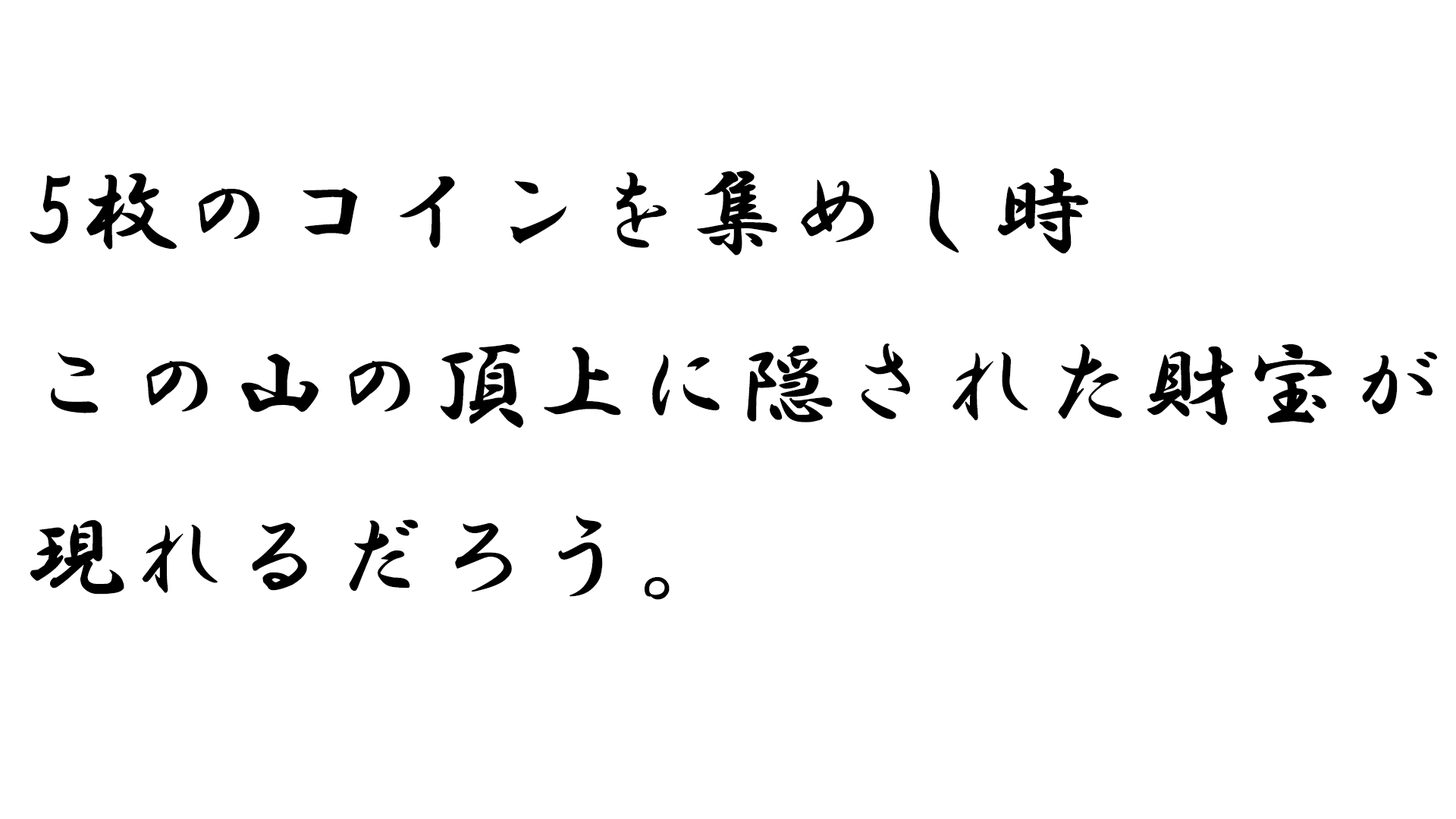
<style>
.page{position:relative;width:1456px;height:819px;background:#ffffff}
.page>*{position:absolute;margin:0}
.t1{font:98.6px "HGGyoshotai";color:#000000;font-weight:bold}
</style>
<div class="page">
<p class="t1" style="left:30px;top:168px;width:1408px;height:432px">5枚のコインを集めし時<br>この山の頂上に隠された財宝が<br>現れるだろう。</p>
</div>
